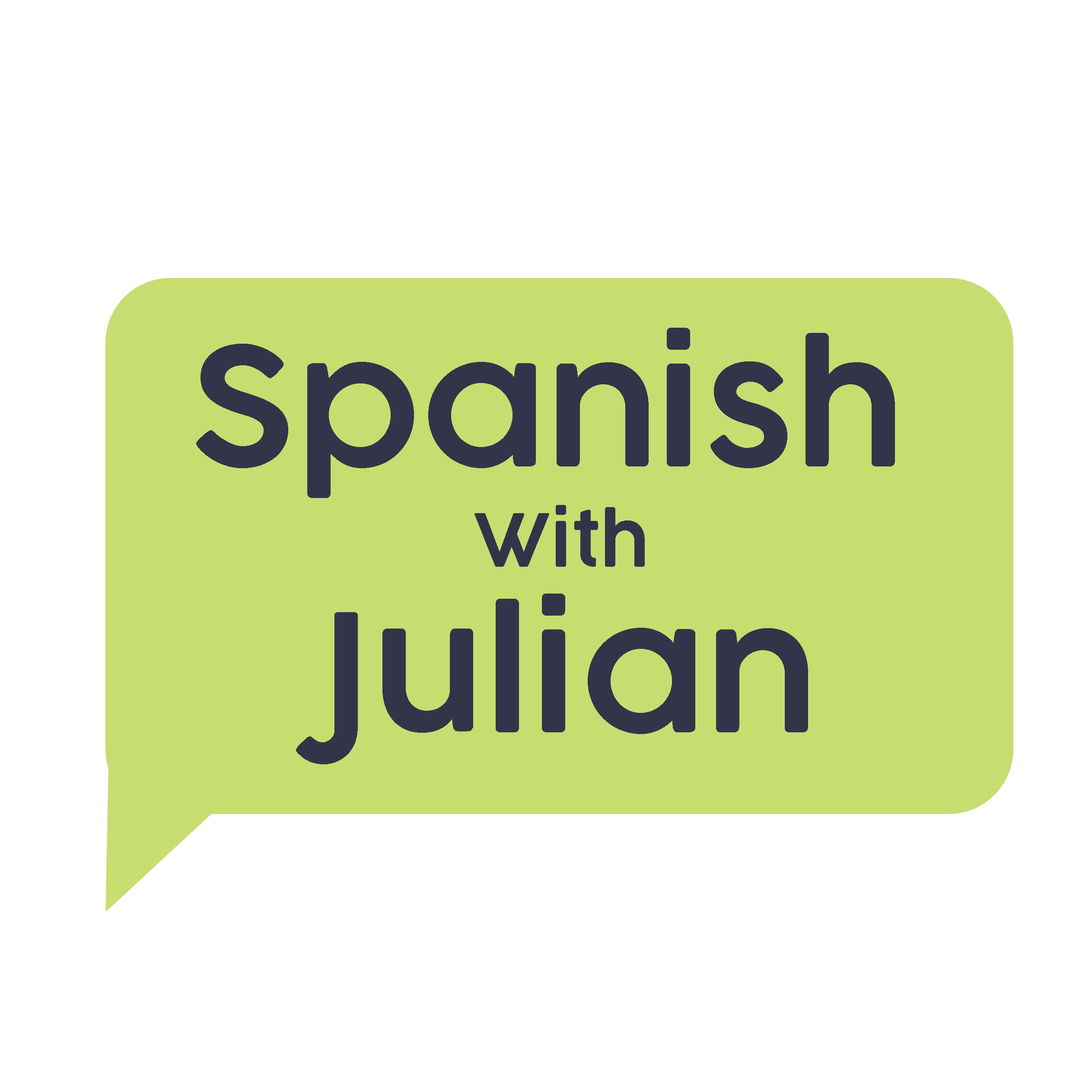
<style>
.page{position:relative;width:1092px;height:1092px;background:#ffffff}
.page>*{position:absolute;margin:0}
.t1{font:162.1px "COCOGOOSE-DemiBold";color:#333449}
.t2{font:72px "COCOGOOSE-DemiBold";color:#333449}
.t3{font:64.8px "COCOGOOSE-DemiBold";color:#333449}
</style>
<div class="page">
<p class="t1" style="left:196px;top:328px;width:699px;height:170px">Spanish</p>
<p class="t2" style="left:475px;top:505px;width:170px;height:62px"><span class="t1"><br></span>With</p>
<p class="t1" style="left:296px;top:593px;width:512px;height:171px"><span class="t3"><br></span>Julian</p>
</div>
